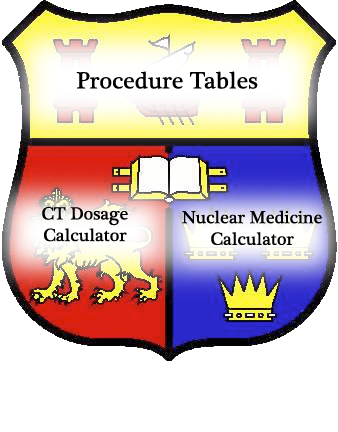
<style>
.page{position:relative;width:338px;height:432px;background:#ffffff}
.page>*{position:absolute;margin:0}
.t1{font:24px "PlantagenetCherokee";color:#000000}
.t2{font:14px "Times-Roman";color:#000000}
.t3{font:18px "PlantagenetCherokee";color:#000000}
</style>
<div class="page">
<p class="t1" style="left:76px;top:71px;width:182px;height:18px"><span class="t2"><br></span>Procedure Tables</p>
<p class="t3" style="left:42px;top:206px;width:86px;height:36px;text-align:center">CT Dosage<br>Calculator</p>
<p class="t3" style="left:182px;top:210px;width:140px;height:35px;text-align:center">Nuclear Medicine Calculator</p>
</div>
